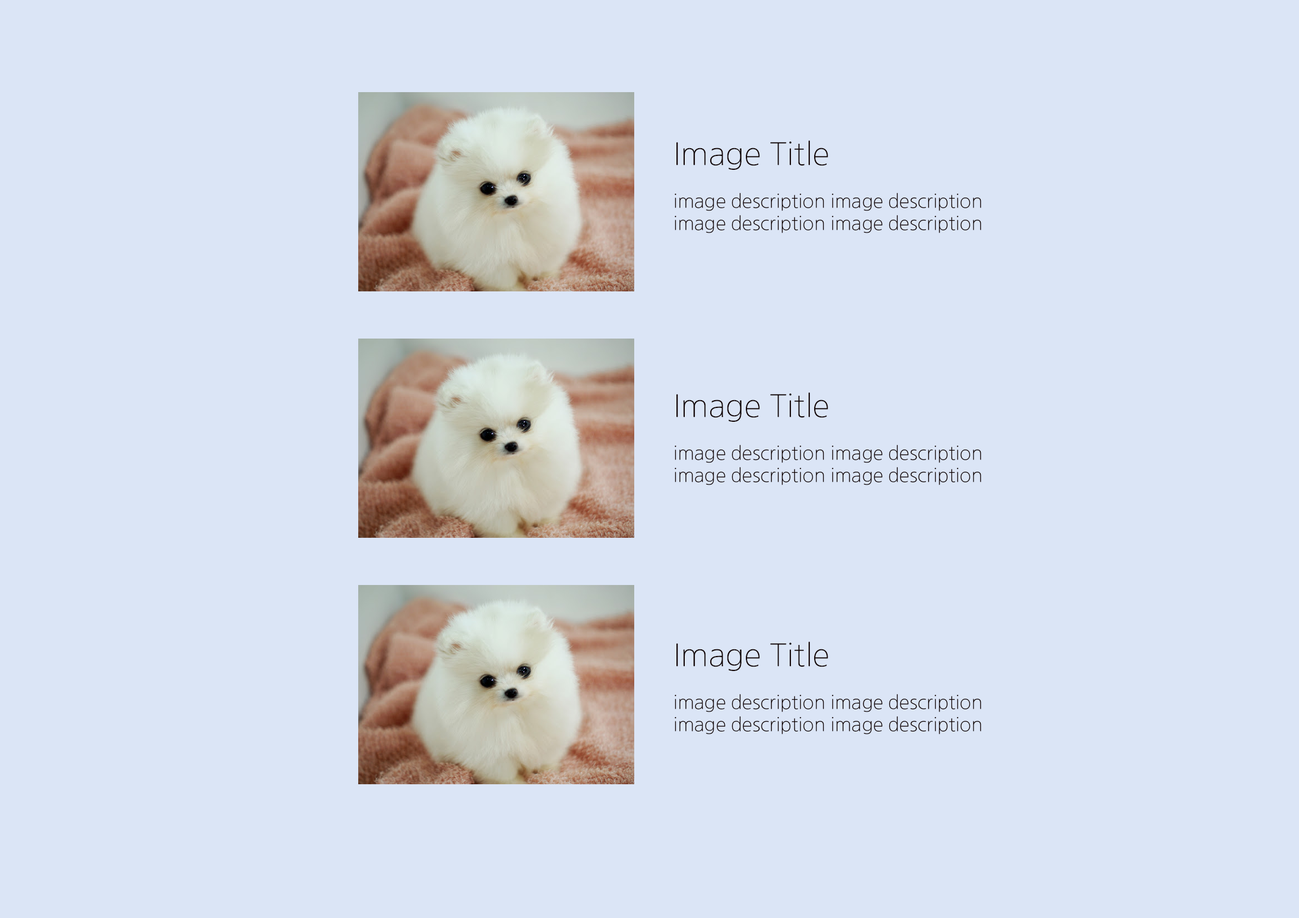
<style>
.page{position:relative;width:1299px;height:918px;background:#dbe5f6}
.page>*{position:absolute;margin:0}
.t1{font:18.5px "NanumGothicOTFLight";color:#110303}
.t2{font:30.8px/43.2px "NanumGothicOTFLight";color:#110303}
.t3{font:18.5px/43.2px "NanumGothicOTFLight";color:#110303}
</style>
<div class="page">
<p class="t1" style="left:675px;top:140px;width:306px;height:93px"><span class="t2">Image Title<br></span><span class="t3">image des</span>cription image description<br>image description image description</p>
<p class="t1" style="left:675px;top:393px;width:306px;height:92px"><span class="t2">Image Title<br></span><span class="t3">image des</span>cription image description<br>image description image description</p>
<p class="t1" style="left:675px;top:642px;width:306px;height:93px"><span class="t2">Image Title<br></span><span class="t3">image des</span>cription image description<br>image description image description</p>
</div>
